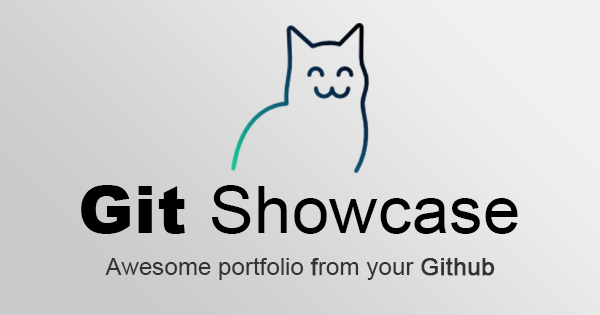
<style>
.page{position:relative;width:600px;height:315px}
.page>*{position:absolute;margin:0}
.t1{font:66.5px "ArialMT";color:#000000}
.t2{font:66.5px "Arial-Black";color:#000000}
.t3{font:24.2px "ArialMT";color:#333333}
.t4{font:24.2px "ArialMT";color:#333333;font-weight:bold}
</style>
<div class="page">
<p class="t1" style="left:81px;top:185px;width:437px;height:49px"><span class="t2">Git </span>Showcase</p>
<p class="t3" style="left:105px;top:257px;width:390px;height:23px">Awesome portfolio <span class="t4">f</span>rom your <span class="t4">Github</span></p>
</div>
